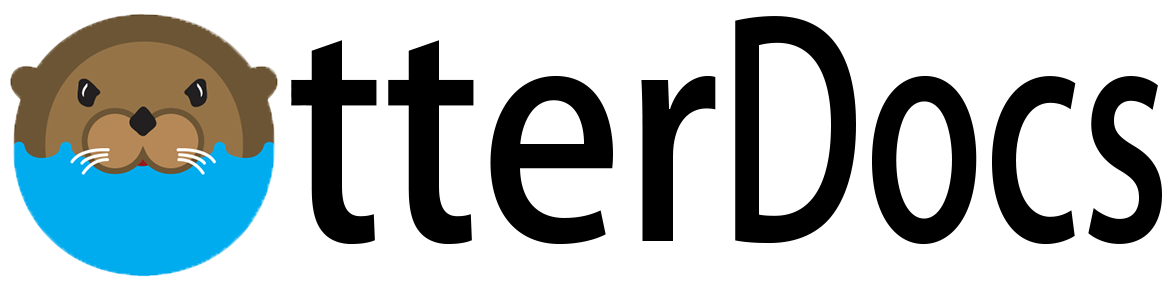
<style>
.page{position:relative;width:1173px;height:292px;background:#ffffff}
.page>*{position:absolute;margin:0}
.t1{font:292px "AdobeHeitiStd-Regular";color:#000000;scale:0.9 1}
.t2{font:292px "AdobeHeitiStd-Regular";color:#000000;scale:0.7 1}
</style>
<div class="page">
<p class="t1" style="left:291px;top:16px;width:871px;height:229px">tter<span class="t2">Docs</span></p>
</div>
